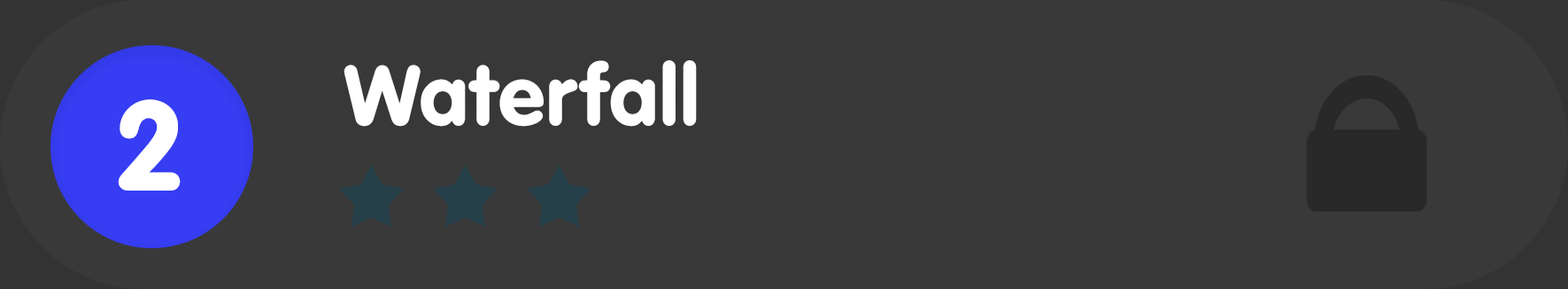
<style>
.page{position:relative;width:1568px;height:289px;background:#393939}
.page>*{position:absolute;margin:0}
.t1{font:88.5px "VAGRundschriftD";color:#ffffff}
.t2{font:132.8px "VAGRundschriftD";color:#ffffff}
</style>
<div class="page">
<p class="t1" style="left:344px;top:60px;width:353px;height:67px">Waterfall</p>
<p class="t2" style="left:118px;top:99px;width:63px;height:91px">2</p>
</div>
